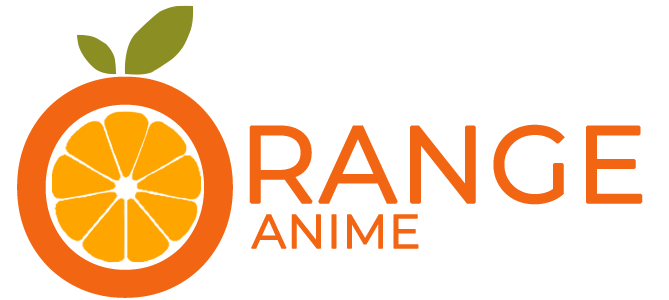
<style>
.page{position:relative;width:669px;height:300px;background:#ffffff}
.page>*{position:absolute;margin:0}
.t1{font:299.1px "Montserrat-Regular";color:#f26513;text-transform:uppercase;font-weight:bold;scale:0.95 1}
.t2{font:107.3px "Montserrat-Regular";color:#f26513;text-transform:uppercase;font-weight:bold}
.t3{font:47.4px "Montserrat-Regular";color:#f26513;text-transform:uppercase;font-weight:bold}
</style>
<div class="page">
<p class="t1" style="left:17px;top:76px;width:216px;height:222px">O</p>
<p class="t2" style="left:249px;top:124px;width:394px;height:81px">range</p>
<p class="t3" style="left:251px;top:214px;width:168px;height:35px">Anime</p>
</div>
